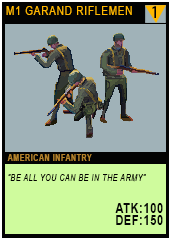
<style>
.page{position:relative;width:170px;height:241px;background:#a0b2b8}
.page>*{position:absolute;margin:0}
.t1{font:11.6px "ArialMT";letter-spacing:0.08em;color:#ffb800;text-transform:uppercase;scale:0.86 1}
.t2{font:15.1px "AdobeHeitiStd-Regular";letter-spacing:0.08em;color:#000006;text-transform:uppercase;scale:0.86 1}
.t3{font:9.3px/20.2px "Arial-ItalicMT";letter-spacing:0.08em;color:#020100;text-transform:uppercase;scale:0.76 1}
.t4{font:9.3px/20.2px "Arial-BoldMT";letter-spacing:0.08em;color:#b4832c;text-transform:uppercase;scale:0.76 1}
.t5{font:13.9px/12px "Arial-BoldMT";letter-spacing:0.08em;color:#050606;text-transform:uppercase;scale:0.76 1}
</style>
<div class="page">
<p class="t1" style="left:6px;top:6px;width:126px;height:9px">m1 garand riflemen</p>
<p class="t2" style="left:152px;top:6px;width:4px;height:12px">1</p>
<p class="t3" style="left:7px;top:154px;width:156px;height:71px"><span class="t4">American infantry<br></span>“bE ALL YOU CAN BE IN THE ARMY”<br><br><span class="t5">atk:100<br>def:150</span></p>
</div>
